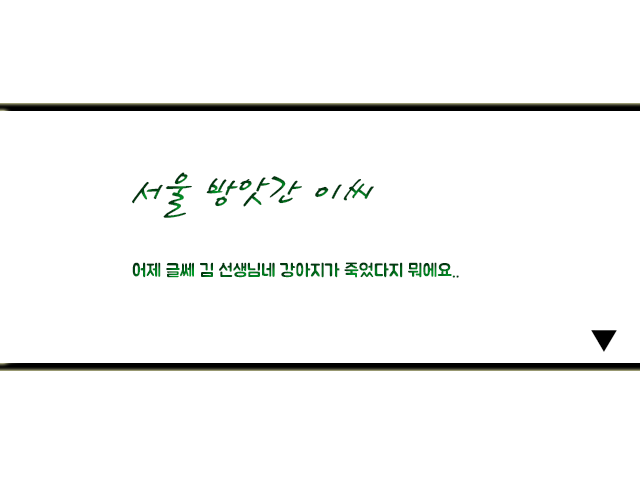
<style>
.page{position:relative;width:640px;height:480px;background:#ffffff}
.page>*{position:absolute;margin:0}
.t1{font:18px "BMJUA"}
.t2{font:48px "HaanCjaB"}
</style>
<div class="page">
<p class="t1" style="left:132px;top:172px;width:327px;height:106px"><span class="t2">서울 방앗간 이씨<br><br></span>어제 글쎄 김 선생님네 강아지가 죽었다지 뭐에요..</p>
</div>
